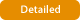
<style>
.page{position:relative;width:80px;height:20px;background:#e68d00}
.page>*{position:absolute;margin:0}
.t1{font:11px "MyriadPro-Semibold";color:#ffffff}
</style>
<div class="page">
<p class="t1" style="left:21px;top:5px;width:39px;height:8px">Detailed</p>
</div>
